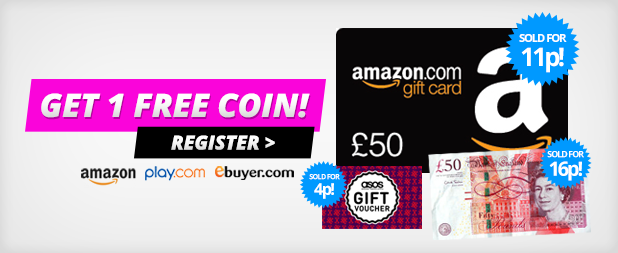
<style>
.page{position:relative;width:618px;height:253px}
.page>*{position:absolute;margin:0}
.t1{font:11.3px/22.6px "OpenSans-Bold";letter-spacing:-0.1em;color:#ffffff}
.t2{font:25.4px/24px "OpenSans-Bold";letter-spacing:-0.1em;color:#ffffff}
.t3{font:55.2px "OpenSans-ExtraboldItalic";color:#ffffff}
.t4{font:33.1px "OpenSans-ExtraboldItalic";color:#ffffff}
.t5{font:8.7px/17.5px "OpenSans-Bold";letter-spacing:-0.1em;color:#ffffff}
.t6{font:19.7px/18.6px "OpenSans-Bold";letter-spacing:-0.1em;color:#ffffff}
.t7{font:7.2px/14.5px "OpenSans-Bold";letter-spacing:-0.1em;color:#ffffff}
.t8{font:16.3px/15.4px "OpenSans-Bold";letter-spacing:-0.1em;color:#ffffff}
</style>
<div class="page">
<p class="t1" style="left:519px;top:34px;width:48px;height:39px;text-align:center">SOLD FOR<br><span class="t2">11p!</span></p>
<p class="t3" style="left:41px;top:93px;width:269px;height:25px">GET 1 FREE COIN!</p>
<p class="t4" style="left:171px;top:135px;width:104px;height:15px">REGISTER &gt;</p>
<p class="t5" style="left:547px;top:151px;width:37px;height:30px;text-align:center">SOLD FOR<br><span class="t6">16p!</span></p>
<p class="t7" style="left:309px;top:174px;width:31px;height:25px;text-align:center">SOLD FOR<br><span class="t8">4p!</span></p>
</div>
